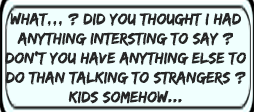
<style>
.page{position:relative;width:254px;height:112px;background:#f0fffe}
.page>*{position:absolute;margin:0}
.t1{font:16.2px "EdoSZ";color:#262626}
</style>
<div class="page">
<p class="t1" style="left:5px;top:12px;width:241px;height:92px;text-align:center">What,,, ? did you thought i had<br>anything intersting to say ?<br>Don’t you have anything else to<br>do than talking to strangers ?<br>kids somehow...</p>
</div>
